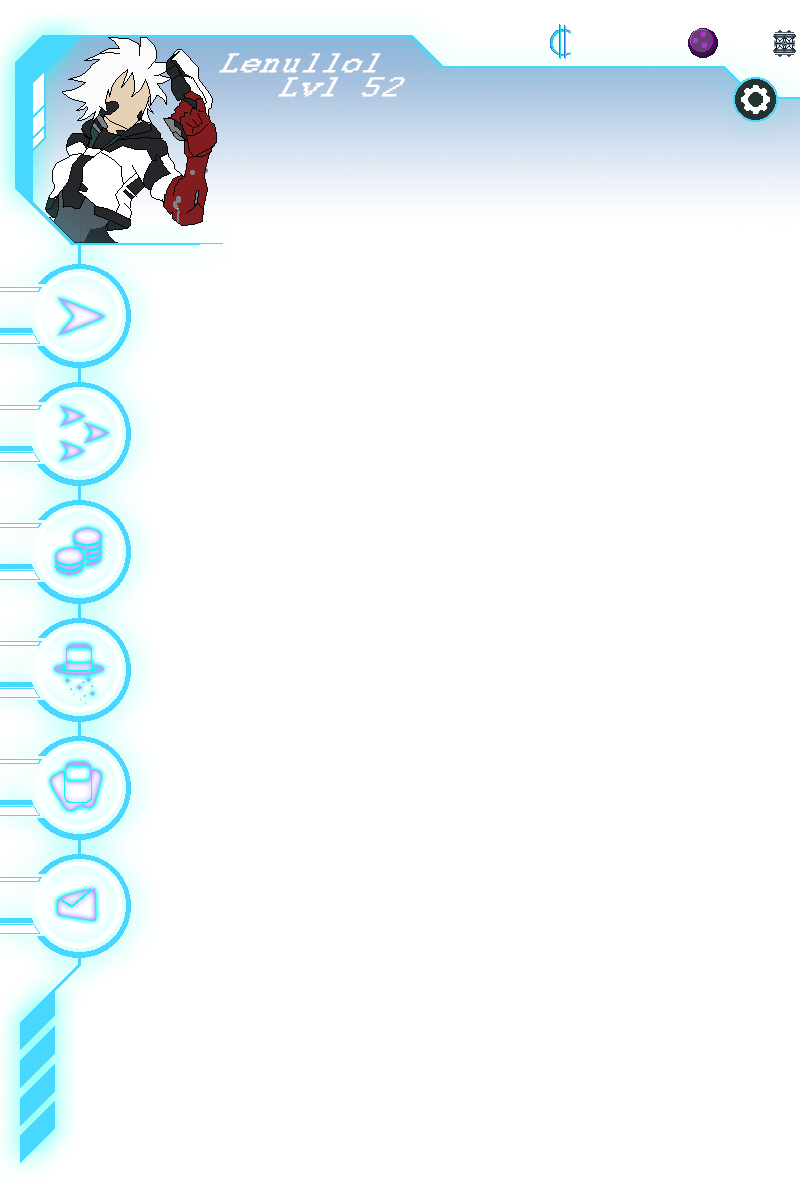
<style>
.page{position:relative;width:800px;height:1200px;background:#ffffff}
.page>*{position:absolute;margin:0}
.t1{font:34.2px/27.4px "Courier";color:#ffffff;font-weight:bold;scale:1.04 1}
</style>
<div class="page">
<p class="t1" style="left:219px;top:53px;width:187px;height:44px">Lenullol<br>  Lvl 52</p>
</div>
